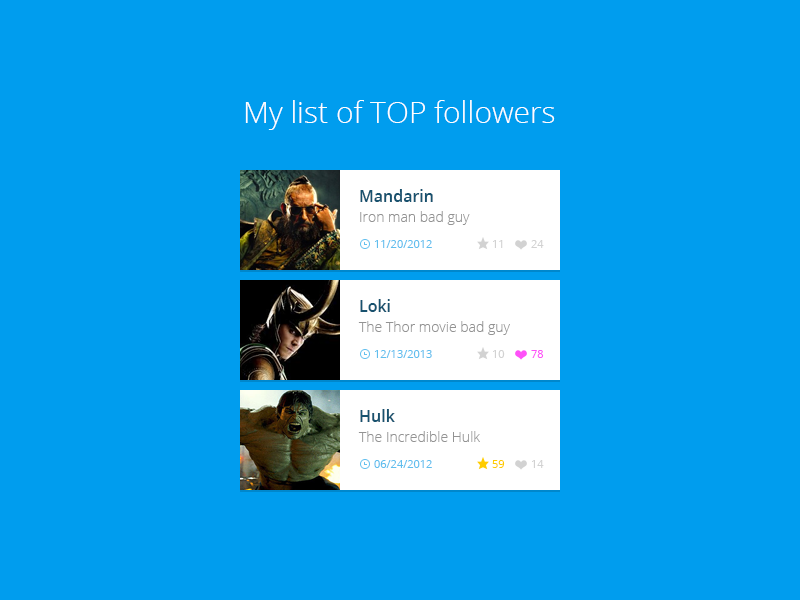
<style>
.page{position:relative;width:800px;height:600px;background:#009dee}
.page>*{position:absolute;margin:0}
.t1{font:30px "OpenSans-Light";color:#ffffff}
.t2{font:16px "OpenSans-Semibold";color:#18526f}
.t3{font:14px "OpenSans-Light";color:#939393}
.t4{font:11px "OpenSans";color:#60beee}
.t5{font:11px "OpenSans";color:#d2d2d2}
.t6{font:11px "OpenSans";color:#fe51f8}
.t7{font:11px "OpenSans";color:#ffcc00}
</style>
<div class="page">
<p class="t1" style="left:245px;top:100px;width:310px;height:30px">My list of TOP followers</p>
<p class="t2" style="left:360px;top:189px;width:73px;height:13px">Mandarin</p>
<p class="t3" style="left:360px;top:211px;width:110px;height:14px">Iron man bad guy</p>
<p class="t4" style="left:375px;top:240px;width:57px;height:8px">11/20/2012</p>
<p class="t5" style="left:493px;top:240px;width:10px;height:8px">11</p>
<p class="t5" style="left:531px;top:240px;width:13px;height:8px">24</p>
<p class="t2" style="left:360px;top:299px;width:30px;height:13px">Loki</p>
<p class="t3" style="left:358px;top:321px;width:152px;height:14px">The Thor movie bad guy</p>
<p class="t4" style="left:375px;top:350px;width:57px;height:8px">12/13/2013</p>
<p class="t5" style="left:493px;top:350px;width:12px;height:8px">10</p>
<p class="t6" style="left:531px;top:350px;width:13px;height:8px">78</p>
<p class="t2" style="left:360px;top:409px;width:35px;height:13px">Hulk</p>
<p class="t3" style="left:358px;top:431px;width:122px;height:11px">The Incredible Hulk</p>
<p class="t4" style="left:374px;top:460px;width:58px;height:8px">06/24/2012</p>
<p class="t7" style="left:492px;top:460px;width:13px;height:8px">59</p>
<p class="t5" style="left:532px;top:460px;width:12px;height:8px">14</p>
</div>
